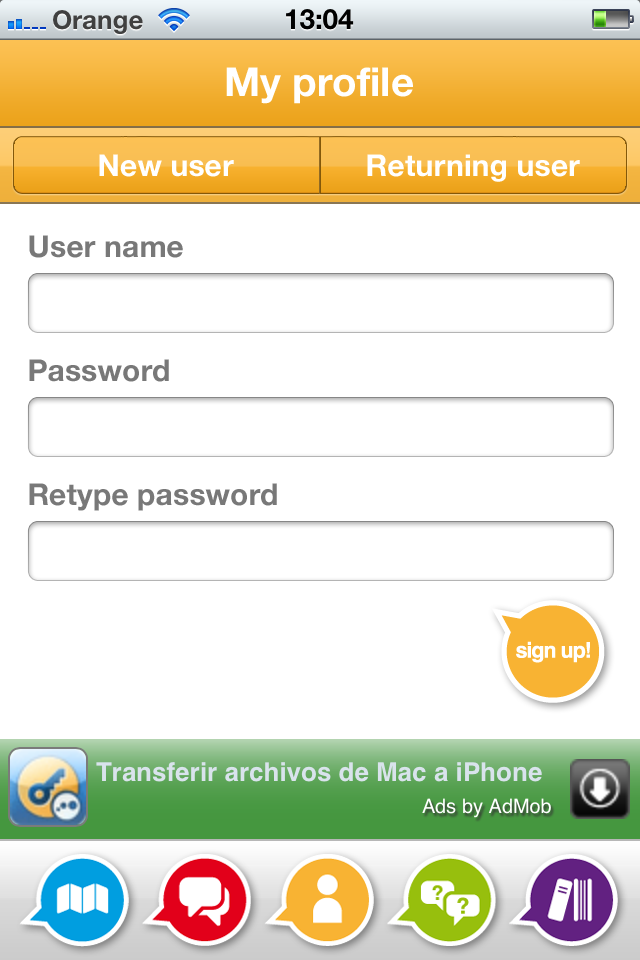
<style>
.page{position:relative;width:640px;height:960px;background:#ffffff}
.page>*{position:absolute;margin:0}
.t1{font:40px "HelveticaNeue-Bold";color:#ffffff}
.t2{font:30px "HelveticaNeue-Bold";letter-spacing:0.005em;color:#ffffff}
.t3{font:30px "HelveticaNeue-Bold";letter-spacing:0.005em;color:#787878}
</style>
<div class="page">
<p class="t1" style="left:226px;top:67px;width:187px;height:37px">My profile</p>
<p class="t2" style="left:99px;top:154px;width:135px;height:23px">New user</p>
<p class="t2" style="left:367px;top:154px;width:213px;height:28px">Returning user</p>
<p class="t3" style="left:29px;top:235px;width:154px;height:23px">User name</p>
<p class="t3" style="left:29px;top:359px;width:140px;height:23px">Password</p>
<p class="t3" style="left:29px;top:483px;width:248px;height:28px">Retype password</p>
</div>
